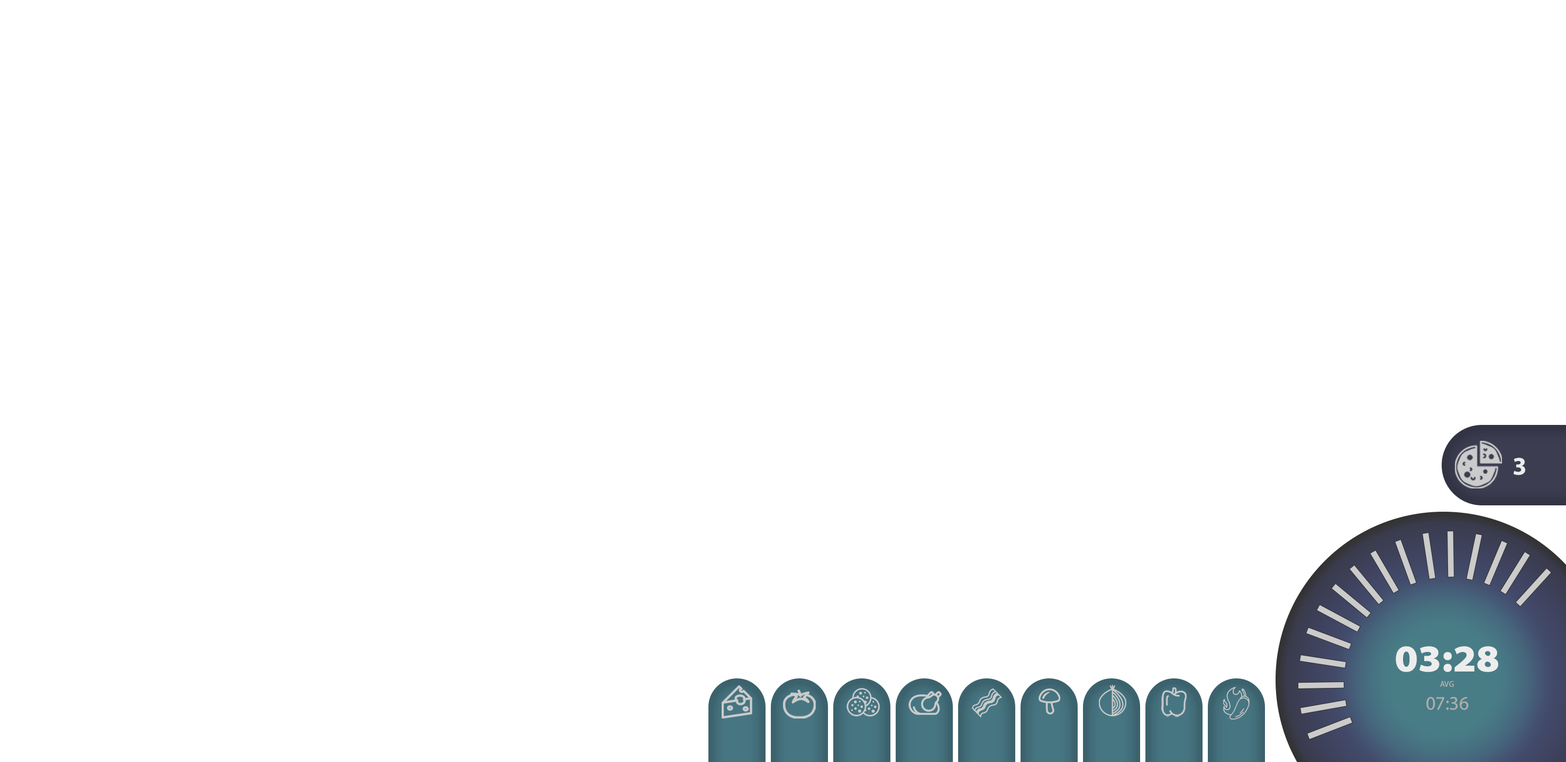
<style>
.page{position:relative;width:1566px;height:762px;background:#ffffff}
.page>*{position:absolute;margin:0}
.t1{font:25.4px "MyriadConceptRoman-Bold";color:#ededed}
.t2{font:38.1px "MyriadConceptRoman-BlackSemiExtended";color:#ededed}
.t3{font:19px "MyriadConceptRoman-Regular";color:#adadad}
.t4{font:8.5px "MyriadConceptRoman-SemiCondensed";color:#adadad}
</style>
<div class="page">
<p class="t1" style="left:1513px;top:458px;width:12px;height:17px">3</p>
<p class="t2" style="left:1395px;top:646px;width:103px;height:26px">03:28</p>
<p class="t3" style="left:1426px;top:681px;width:42px;height:29px;text-align:center"><span class="t4">AVG<br></span>07:36</p>
</div>
